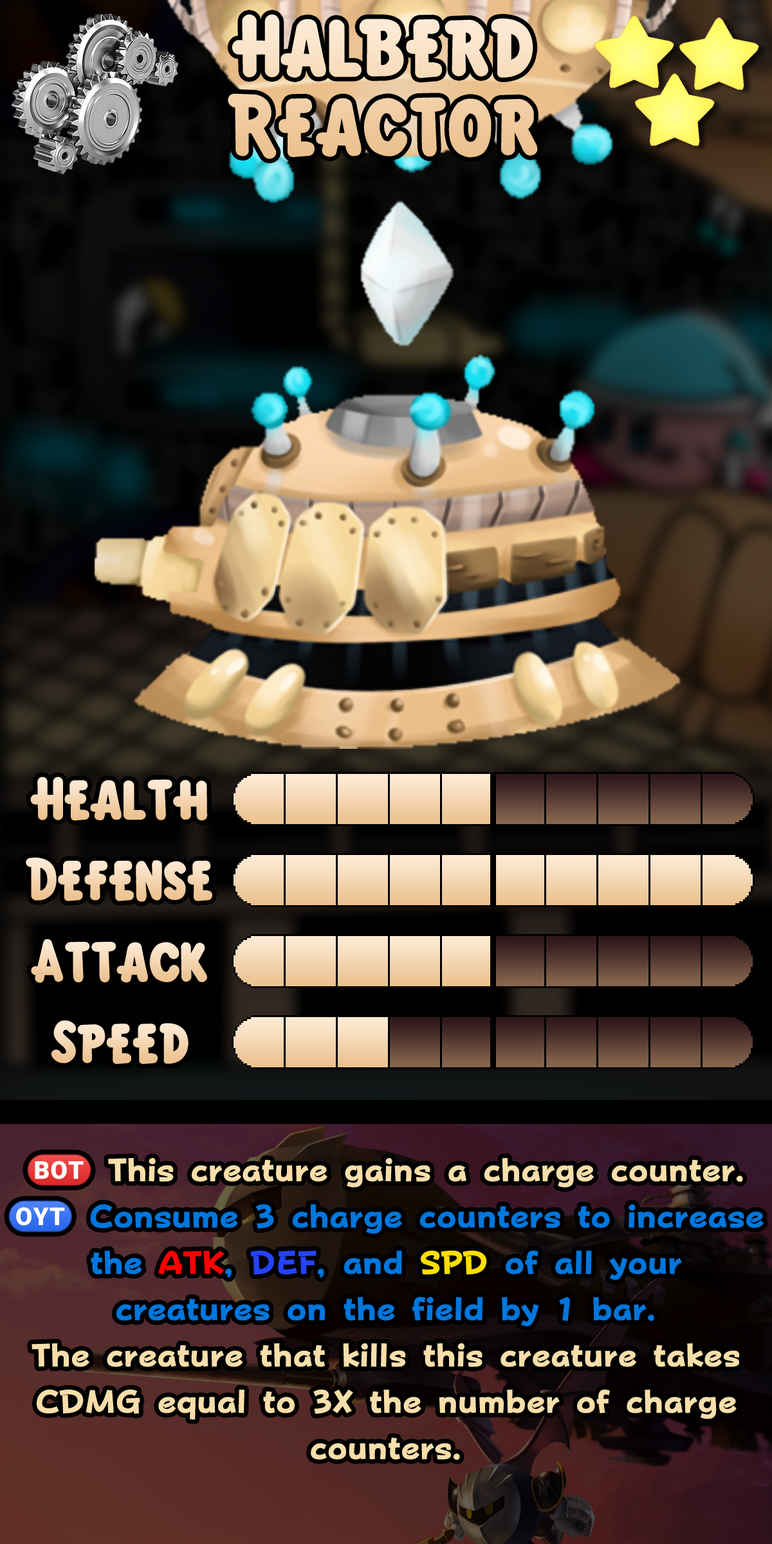
<style>
.page{position:relative;width:772px;height:1544px}
.page>*{position:absolute;margin:0}
.t1{font:135.1px/79.1px "KirbyClassic"}
.t2{font:92.7px "KirbyClassic"}
.t3{font:55.3px/46.3px "FOTPopHappinessStrp-ExtraBold";color:#f8deaa}
.t4{font:55.3px/46.3px "stoogedings-Regular";color:#f8deaa}
.t5{font:55.3px/46.3px "stoogedings-Regular";color:#0077dd}
.t6{font:55.3px/46.3px "FOTPopHappinessStrp-ExtraBold";color:#0077dd}
.t7{font:55.3px/46.3px "FOTPopHappinessStrp-ExtraBold";color:#ff0000}
.t8{font:55.3px/46.3px "FOTPopHappinessStrp-ExtraBold";color:#2443ff}
.t9{font:55.3px/46.3px "FOTPopHappinessStrp-ExtraBold";color:#ffde00}
</style>
<div class="page">
<p class="t1" style="left:228px;top:14px;width:310px;height:145px;text-align:center">Halberd<br>Reactor</p>
<p class="t2" style="left:30px;top:777px;width:178px;height:44px">Health</p>
<p class="t2" style="left:26px;top:858px;width:186px;height:44px">Defense</p>
<p class="t2" style="left:31px;top:939px;width:176px;height:44px">Attack</p>
<p class="t2" style="left:51px;top:1021px;width:138px;height:43px">Speed</p>
<p class="t3" style="left:8px;top:1154px;width:756px;height:306px;text-align:center"><span class="t4">(BOT)</span> This creature gains a charge counter. <br><span class="t5">(OYT)</span><span class="t6"> Consume 3 charge counters to increase the </span><span class="t7">ATK</span><span class="t6">, </span><span class="t8">DEF</span><span class="t6">, and </span><span class="t9">SPD</span><span class="t6"> of all your creatures on the field by 1 bar.<br></span>The creature that kills this creature takes CDMG equal to 3X the number of charge counters.</p>
</div>
